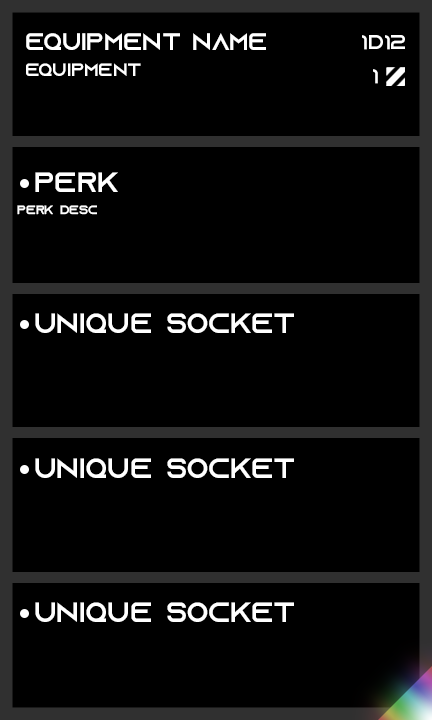
<style>
.page{position:relative;width:432px;height:720px;background:#000000}
.page>*{position:absolute;margin:0}
.t1{font:24px "AzonixRegular";color:#ffffff}
.t2{font:20px "AzonixRegular";color:#ffffff}
.t3{font:18px "AzonixRegular";color:#ffffff}
.t4{font:28px "AzonixRegular";color:#ffffff}
.t5{font:12px "AzonixRegular";color:#ffffff}
</style>
<div class="page">
<p class="t1" style="left:26px;top:33px;width:240px;height:17px">equipment name</p>
<p class="t2" style="left:362px;top:35px;width:43px;height:15px">1d12</p>
<p class="t3" style="left:26px;top:63px;width:115px;height:13px">Equipment</p>
<p class="t2" style="left:373px;top:69px;width:5px;height:15px">1</p>
<p class="t4" style="left:35px;top:172px;width:83px;height:20px">perk</p>
<p class="t5" style="left:17px;top:205px;width:80px;height:10px">perk desc</p>
<p class="t4" style="left:35px;top:313px;width:259px;height:20px">unique socket</p>
<p class="t4" style="left:35px;top:458px;width:259px;height:20px">unique socket</p>
<p class="t4" style="left:35px;top:602px;width:259px;height:20px">unique socket</p>
</div>
